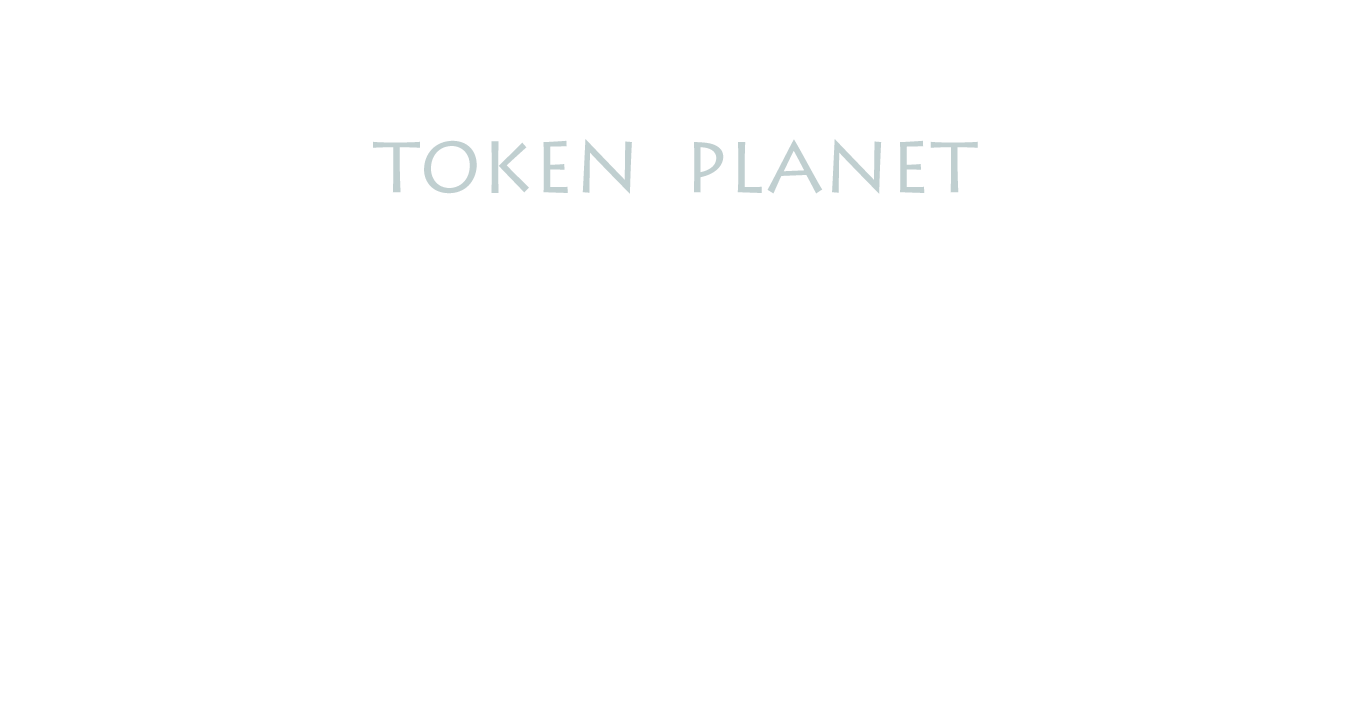
<style>
.page{position:relative;width:1350px;height:720px;background:#ffffff}
.page>*{position:absolute;margin:0}
.t1{font:72px "LithosPro-Regular";color:#c0cfd0}
</style>
<div class="page">
<p class="t1" style="left:373px;top:139px;width:605px;height:55px">TOKEN  PLANET</p>
</div>
